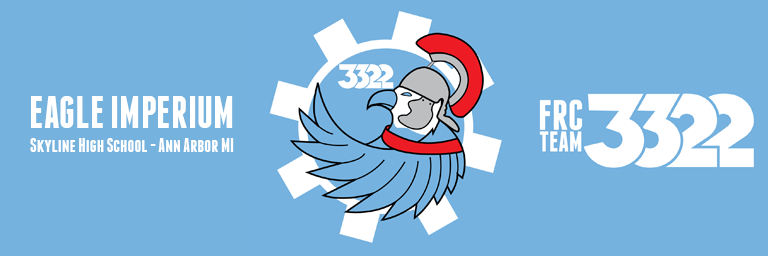
<style>
.page{position:relative;width:768px;height:256px;background:#75b2dd}
.page>*{position:absolute;margin:0}
.t1{font:44.5px "Franchise-Bold";color:#ffffff}
.t2{font:19.7px "Franchise-Bold";color:#ffffff}
</style>
<div class="page">
<p class="t1" style="left:31px;top:96px;width:202px;height:32px">EAGLE IMPERIUM</p>
<p class="t2" style="left:30px;top:138px;width:204px;height:14px">Skyline High School - Ann Arbor MI</p>
</div>
